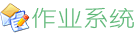
<style>
.page{position:relative;width:135px;height:37px;background:#ffffff}
.page>*{position:absolute;margin:0}
.t1{font:21.7px "YouYuan";color:#5fb878;scale:1.2 1}
</style>
<div class="page">
<p class="t1" style="left:32px;top:7px;width:102px;height:22px">作业系统</p>
</div>
